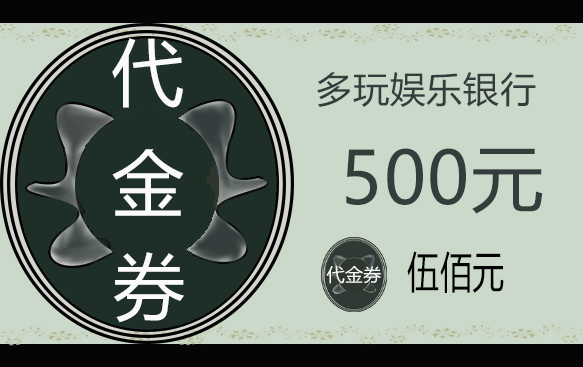
<style>
.page{position:relative;width:583px;height:367px;background:#cbd9ca}
.page>*{position:absolute;margin:0}
.t1{font:72px "MicrosoftYaHei";letter-spacing:0.02em;color:#fbfbfb}
.t2{font:36px "MicrosoftYaHei";letter-spacing:0.02em;color:#333d3c}
.t3{font:72px "MicrosoftYaHei";letter-spacing:0.02em;color:#333d3c}
.t4{font:43.1px "MicrosoftYaHei";letter-spacing:0.02em;color:#020202;scale:0.74 1}
.t5{font:18px "MicrosoftYaHei";letter-spacing:0.02em;color:#fcfafa}
</style>
<div class="page">
<p class="t1" style="left:112px;top:38px;width:71px;height:70px">代</p>
<p class="t2" style="left:317px;top:72px;width:219px;height:35px">多玩娱乐银行</p>
<p class="t1" style="left:112px;top:149px;width:72px;height:67px">金</p>
<p class="t3" style="left:346px;top:148px;width:197px;height:66px">500元</p>
<p class="t1" style="left:114px;top:252px;width:70px;height:71px">券</p>
<p class="t4" style="left:407px;top:251px;width:97px;height:42px">伍佰元</p>
<p class="t5" style="left:326px;top:266px;width:55px;height:18px">代金券</p>
</div>
